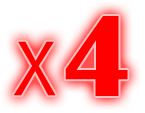
<style>
.page{position:relative;width:145px;height:113px;background:#ffffff}
.page>*{position:absolute;margin:0}
.t1{font:100px "HGGothicM";color:#fe0000}
.t2{font:120px "BritannicBold";color:#fe0000}
</style>
<div class="page">
<p class="t1" style="left:13px;top:16px;width:115px;height:80px">x<span class="t2">4</span></p>
</div>
